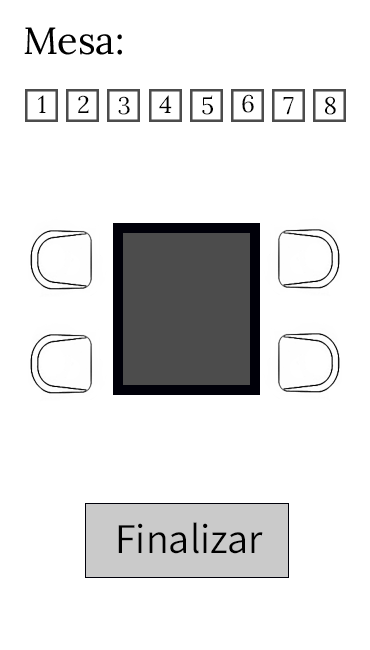
<style>
.page{position:relative;width:370px;height:650px;background:#ffffff}
.page>*{position:absolute;margin:0}
.t1{font:37.9px "Lora-Regular";color:#000000}
.t2{font:24px "Lora-Regular";color:#000000}
.t3{font:42.1px "Assistant-Regular";color:#000000}
</style>
<div class="page">
<p class="t1" style="left:24px;top:27px;width:98px;height:28px">Mesa:</p>
<p class="t2" style="left:38px;top:95px;width:8px;height:18px">1</p>
<p class="t2" style="left:78px;top:95px;width:11px;height:18px">2</p>
<p class="t2" style="left:118px;top:96px;width:12px;height:19px">3</p>
<p class="t2" style="left:159px;top:95px;width:13px;height:18px">4</p>
<p class="t2" style="left:202px;top:95px;width:11px;height:20px">5</p>
<p class="t2" style="left:242px;top:94px;width:12px;height:19px">6</p>
<p class="t2" style="left:283px;top:97px;width:11px;height:18px">7</p>
<p class="t2" style="left:325px;top:96px;width:11px;height:19px">8</p>
<p class="t3" style="left:118px;top:522px;width:145px;height:32px">Finalizar</p>
</div>
